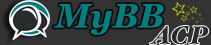
<style>
.page{position:relative;width:211px;height:45px;background:#333333}
.page>*{position:absolute;margin:0}
.t1{font:33.8px "Georgia-BoldItalic";color:#008080}
</style>
<div class="page">
<p class="t1" style="left:53px;top:4px;width:111px;height:31px">MyBB</p>
</div>
